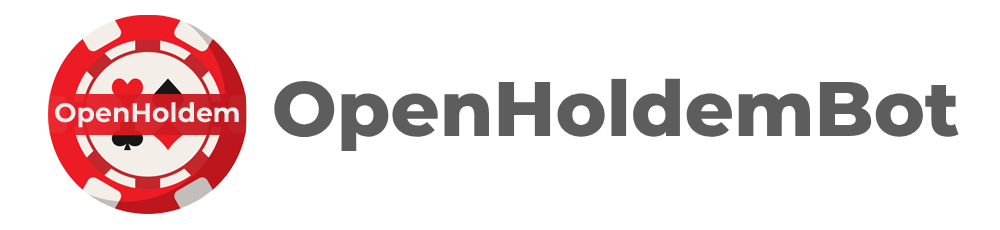
<style>
.page{position:relative;width:1000px;height:230px;background:#ffffff}
.page>*{position:absolute;margin:0}
.t1{font:77px "Montserrat-ExtraBold";color:#5d5d5d}
.t2{font:26.7px "Montserrat-Bold";color:#eeeeee}
</style>
<div class="page">
<p class="t1" style="left:274px;top:78px;width:685px;height:73px">OpenHoldemBot</p>
<p class="t2" style="left:55px;top:102px;width:184px;height:26px">OpenHoldem</p>
</div>
